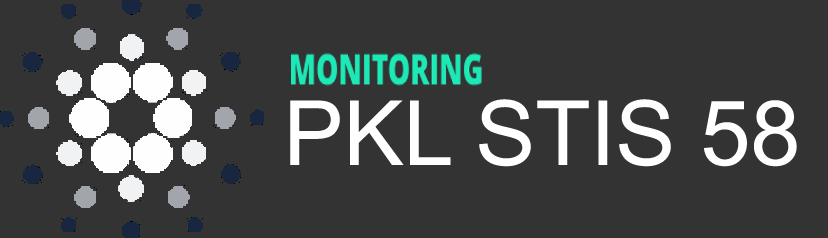
<style>
.page{position:relative;width:828px;height:238px;background:#333333}
.page>*{position:absolute;margin:0}
.t1{font:90px "ArialMT";color:#ffffff}
</style>
<div class="page">
<p class="t1" style="left:290px;top:99px;width:507px;height:68px">PKL STIS 58</p>
</div>
